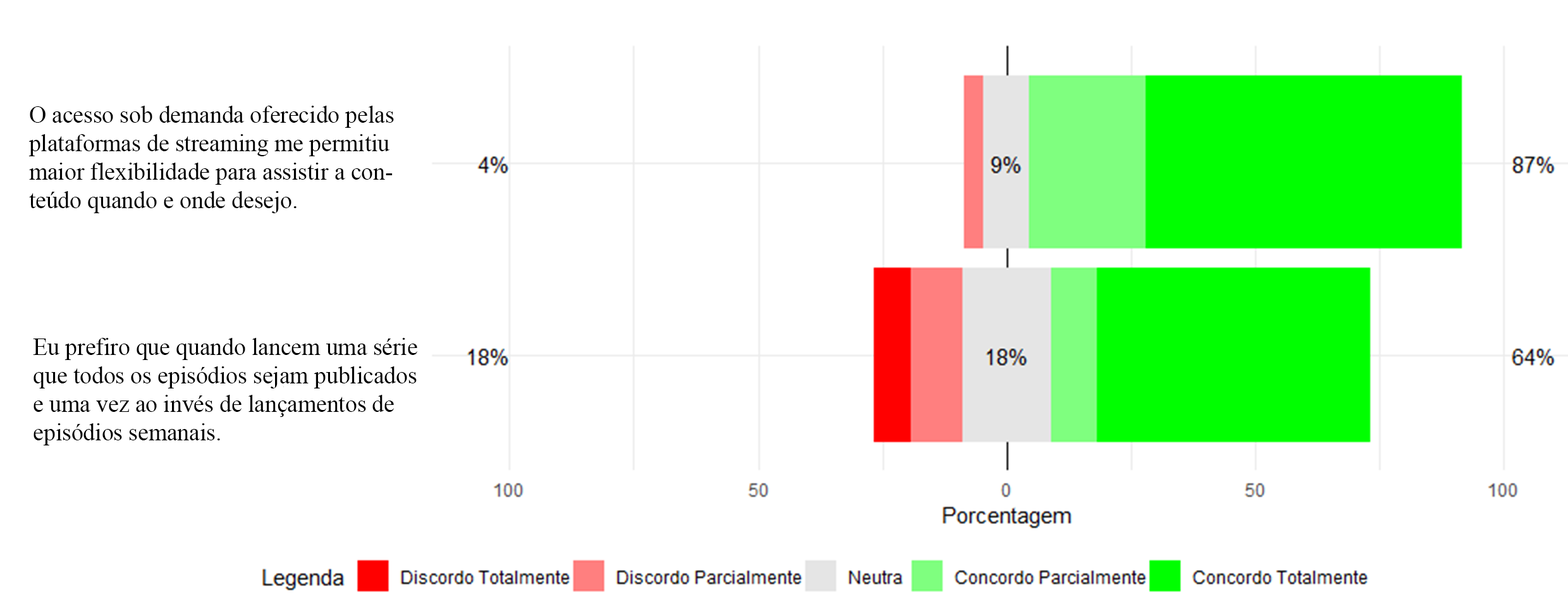
<style>
.page{position:relative;width:1568px;height:615px;background:#ffffff}
.page>*{position:absolute;margin:0}
.t1{font:23.7px "TimesNewRomanPSMT";color:#000000}
</style>
<div class="page">
<p class="t1" style="left:28px;top:106px;width:366px;height:107px">O acesso sob demanda oferecido pelas <br>plataformas de streaming me permitiu <br>maior flexibilidade para assistir a con-<br>teúdo quando e onde desejo.</p>
<p class="t1" style="left:33px;top:338px;width:384px;height:107px">Eu prefiro que quando lancem uma série<br>que todos os episódios sejam publicados<br>e uma vez ao invés de lançamentos de <br>episódios semanais.</p>
</div>
